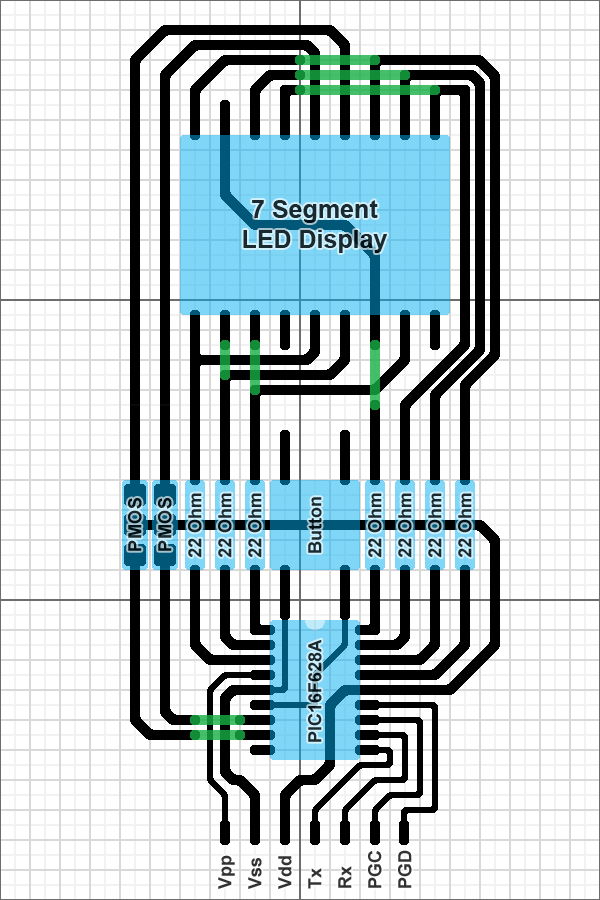
<style>
.page{position:relative;width:600px;height:900px;background:#ffffff}
.page>*{position:absolute;margin:0}
.t1{font:25px "Arial-BoldMT";color:#192b31}
.t2{font:18px "Arial-BoldMT";color:#182a30}
.t3{font:18px "Arial-BoldMT";color:#192b31}
.t4{font:18px "Arial-BoldMT";letter-spacing:0.03em;color:#000000}
.t5{font:18px/15px "Arial-BoldMT";color:#333333}
</style>
<div class="page">
<p class="t1" style="left:243px;top:200px;width:145px;height:53px;text-align:center">7 Segment<br>LED Display</p>
<p class="t2" style="left:188px;top:493px;width:14px;height:65px;rotate:-90deg">22 Ohm</p>
<p class="t2" style="left:218px;top:493px;width:14px;height:65px;rotate:-90deg">22 Ohm</p>
<p class="t2" style="left:248px;top:493px;width:14px;height:65px;rotate:-90deg">22 Ohm</p>
<p class="t3" style="left:308px;top:497px;width:14px;height:56px;rotate:-90deg">Button</p>
<p class="t2" style="left:368px;top:493px;width:14px;height:65px;rotate:-90deg">22 Ohm</p>
<p class="t2" style="left:398px;top:493px;width:14px;height:65px;rotate:-90deg">22 Ohm</p>
<p class="t2" style="left:428px;top:493px;width:14px;height:65px;rotate:-90deg">22 Ohm</p>
<p class="t2" style="left:458px;top:493px;width:14px;height:65px;rotate:-90deg">22 Ohm</p>
<p class="t4" style="left:128px;top:498px;width:14px;height:53px;rotate:-90deg;opacity:0.8">PMOS</p>
<p class="t4" style="left:158px;top:498px;width:14px;height:53px;rotate:-90deg;opacity:0.8">PMOS</p>
<p class="t3" style="left:308px;top:639px;width:14px;height:103px;rotate:-90deg">PIC16F628A</p>
<p class="t5" style="left:218px;top:850px;width:194px;height:39px;rotate:-90deg">Vpp<br><br>Vss<br><br>Vdd<br><br>Tx<br><br>Rx<br><br>PGC<br><br>PGD</p>
</div>
